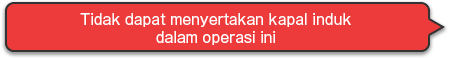
<style>
.page{position:relative;width:450px;height:58px;background:#ed3b3b}
.page>*{position:absolute;margin:0}
.t1{font:14px/18px "GothicMB101Pro-Regular";color:#ffffff}
</style>
<div class="page">
<p class="t1" style="left:80px;top:13px;width:271px;height:32px;text-align:center">Tidak dapat menyertakan kapal induk<br>dalam operasi ini</p>
</div>
